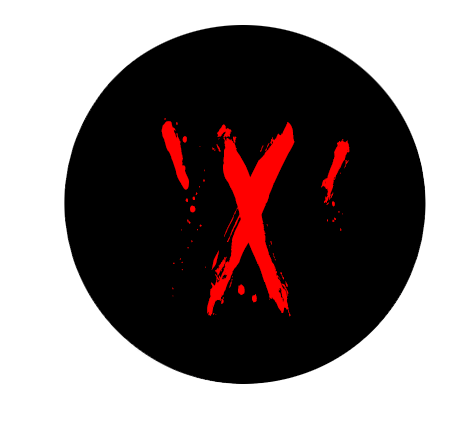
<style>
.page{position:relative;width:472px;height:432px;background:#ffffff}
.page>*{position:absolute;margin:0}
.t1{font:304px "YouMurdererBB";letter-spacing:0.1em;color:#ff0000;scale:0.57 1}
.t2{font:437.8px "YouMurdererBB";letter-spacing:0.1em;color:#ff0000;scale:0.57 1}
</style>
<div class="page">
<p class="t1" style="left:161px;top:118px;width:189px;height:199px">‘<span class="t2">X</span>’</p>
</div>
